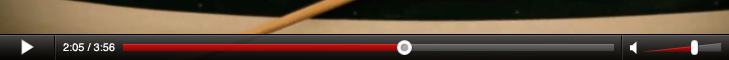
<style>
.page{position:relative;width:729px;height:60px}
.page>*{position:absolute;margin:0}
.t1{font:11px "Helvetica";color:#ffffff}
</style>
<div class="page">
<p class="t1" style="left:63px;top:43px;width:52px;height:9px">2:05 / 3:56</p>
</div>
